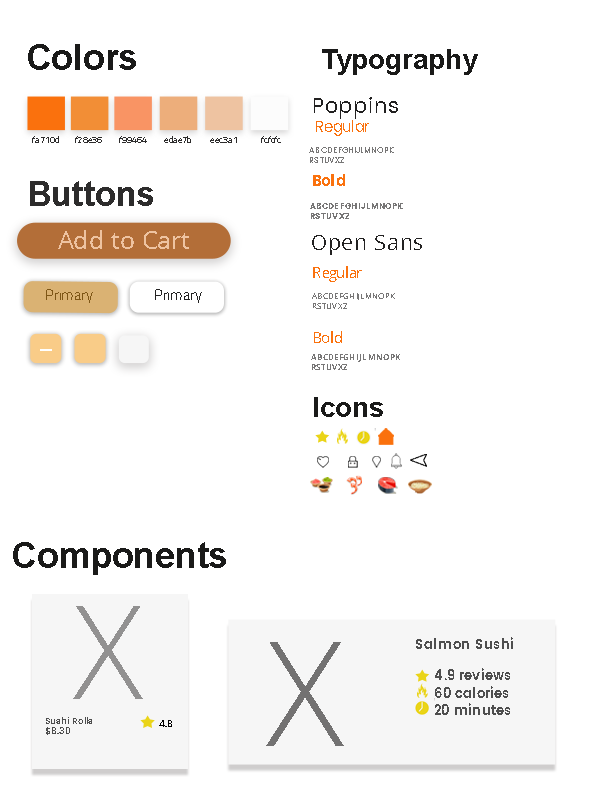
<style>
.page{position:relative;width:600px;height:808px;background:#ffffff}
.page>*{position:absolute;margin:0}
.t1{font:35.6px "Arial-BoldMT";color:#1a1a19}
.t2{font:27.7px "Arial-BoldMT";color:#1a1a19}
.t3{font:20.8px "Poppins-Regular";letter-spacing:0.04em;color:#222121}
.t4{font:15.3px "Poppins-Regular";color:#fa710d}
.t5{font:9px "Antaro";color:#2d2c2c}
.t6{font:9px "OpenSans";color:#2d2c2c}
.t7{font:8.3px "Poppins-Regular";letter-spacing:0.04em;color:#777676}
.t8{font:15.3px "Poppins";color:#fa710d}
.t9{font:34.9px "Arial-BoldMT";color:#2d2c2c}
.t10{font:8.3px "Poppins";letter-spacing:0.04em;color:#777676}
.t11{font:25.1px "OpenSans";color:#eec3a1}
.t12{font:20.8px "OpenSans";letter-spacing:0.04em;color:#222121}
.t13{font:15.3px "OpenSans";color:#fa710d}
.t14{font:14.9px "Antaro";color:#7e5616}
.t15{font:14.9px "Antaro";color:#232222}
.t16{font:8.3px "OpenSans";letter-spacing:0.04em;color:#777676}
.t17{font:8.3px "OpenSans-Bold";letter-spacing:0.04em;color:#777676}
.t18{font:130.2px "OpenSans-Light";color:#929191}
.t19{font:13.3px "Poppins-SemiBold";color:#4e4e4e}
.t20{font:144.9px "OpenSans-Light";color:#737272}
.t21{font:12.9px/17.2px "Poppins-SemiBold";color:#4e4e4e}
.t22{font:9px "Poppins-Medium";color:#4e4e4e}
.t23{font:9px "Poppins-Medium";color:#000000}
</style>
<div class="page">
<p class="t1" style="left:28px;top:44px;width:108px;height:26px">Colors</p>
<p class="t2" style="left:322px;top:49px;width:156px;height:26px">Typography</p>
<p class="t3" style="left:314px;top:97px;width:84px;height:22px">Poppins</p>
<p class="t4" style="left:316px;top:120px;width:53px;height:16px">Regular</p>
<p class="t5" style="left:32px;top:136px;width:27px;height:7px;text-align:center">fa710d<br><span class="t6">d</span></p>
<p class="t5" style="left:75px;top:136px;width:27px;height:7px;text-align:center">f28e36<br><span class="t6">d</span></p>
<p class="t5" style="left:119px;top:136px;width:28px;height:7px;text-align:center">f99464<br><span class="t6">d</span></p>
<p class="t5" style="left:164px;top:136px;width:27px;height:7px;text-align:center">edae7b<br><span class="t6">d</span></p>
<p class="t5" style="left:210px;top:137px;width:27px;height:6px;text-align:center">eec3a1<br><span class="t6">d</span></p>
<p class="t5" style="left:261px;top:136px;width:20px;height:7px;text-align:center">fcfcfc<br><span class="t6">d</span></p>
<p class="t7" style="left:309px;top:147px;width:85px;height:16px">ABCDEFGHIJLMNOPK<br>RSTUVXZ</p>
<p class="t8" style="left:313px;top:174px;width:32px;height:12px">Bold</p>
<p class="t9" style="left:30px;top:181px;width:123px;height:25px">Buttons</p>
<p class="t10" style="left:310px;top:203px;width:93px;height:16px">ABCDEFGHIJLMNOPK<br>RSTUVXZ</p>
<p class="t11" style="left:58px;top:230px;width:131px;height:19px">Add to Cart</p>
<p class="t12" style="left:312px;top:235px;width:110px;height:20px">Open Sans</p>
<p class="t13" style="left:313px;top:266px;width:49px;height:16px">Regular</p>
<p class="t14" style="left:46px;top:289px;width:47px;height:14px">Primary</p>
<p class="t15" style="left:155px;top:289px;width:47px;height:14px">Primary</p>
<p class="t16" style="left:312px;top:293px;width:83px;height:16px">ABCDEFGHIJLMNOPK<br>RSTUVXZ</p>
<p class="t13" style="left:314px;top:331px;width:28px;height:12px">Bold</p>
<p class="t17" style="left:311px;top:354px;width:89px;height:16px">ABCDEFGHIJLMNOPK<br>RSTUVXZ</p>
<p class="t2" style="left:314px;top:397px;width:69px;height:20px">Icons</p>
<p class="t1" style="left:13px;top:542px;width:213px;height:33px">Components</p>
<p class="t18" style="left:73px;top:606px;width:70px;height:93px">X</p>
<p class="t19" style="left:416px;top:637px;width:97px;height:12px">Salmon Sushi</p>
<p class="t20" style="left:266px;top:642px;width:78px;height:104px">X</p>
<p class="t21" style="left:435px;top:668px;width:75px;height:47px">4.9 reviews<br>60 calories<br>20 minutes</p>
<p class="t22" style="left:46px;top:717px;width:46px;height:18px">Sushi Rolls<br>$8.30</p>
<p class="t23" style="left:159px;top:720px;width:13px;height:7px">4.8</p>
</div>
